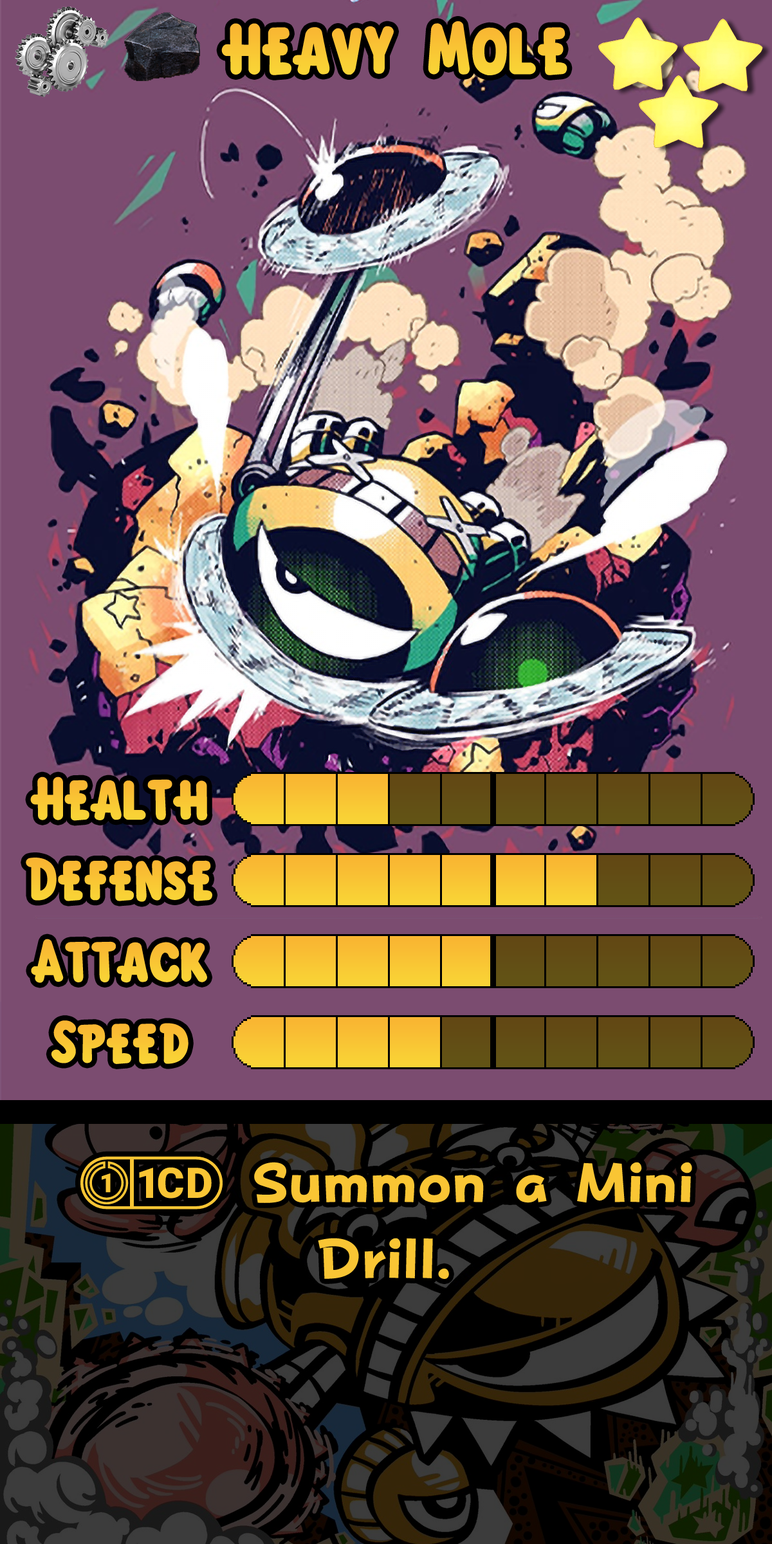
<style>
.page{position:relative;width:772px;height:1544px;background:#7b4c70}
.page>*{position:absolute;margin:0}
.t1{font:110px "KirbyClassic";color:#f9c634}
.t2{font:92.7px "KirbyClassic";color:#f9c634}
.t3{font:92.7px "KirbyClassic";color:#f9c434}
.t4{font:94.6px "FOTPopHappinessStrp-ExtraBold";color:#f9c534}
.t5{font:94.6px "stoogedings-Regular";color:#f9c534}
</style>
<div class="page">
<p class="t1" style="left:221px;top:21px;width:347px;height:54px">Heavy Mole</p>
<p class="t2" style="left:30px;top:777px;width:178px;height:44px">Health</p>
<p class="t3" style="left:26px;top:858px;width:186px;height:44px">Defense</p>
<p class="t2" style="left:31px;top:939px;width:176px;height:44px">Attack</p>
<p class="t3" style="left:51px;top:1021px;width:138px;height:43px">Speed</p>
<p class="t4" style="left:80px;top:1156px;width:612px;height:123px"><span class="t5">(1CD)</span> Summon a Mini Drill.</p>
</div>
